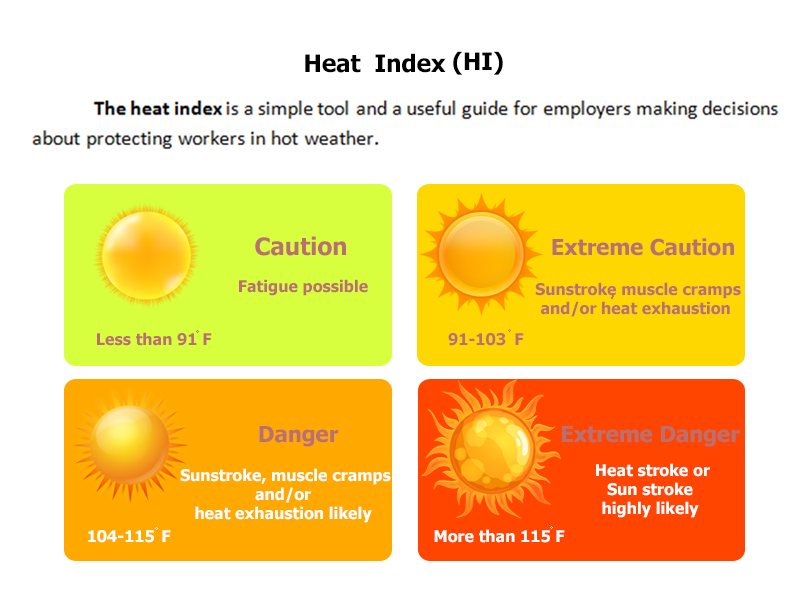
<style>
.page{position:relative;width:800px;height:600px;background:#ffffff}
.page>*{position:absolute;margin:0}
.t1{font:24px "Tahoma-Bold";color:#000000}
.t2{font:24px "Tahoma-Bold";color:#b97070}
.t3{font:22px "Tahoma-Bold";color:#b97070}
.t4{font:16px "Tahoma-Bold";color:#b97070}
.t5{font:16px "Tahoma-Bold";color:#fefefe}
.t6{font:16px "Tahoma-Bold";color:#ffffff}
</style>
<div class="page">
<p class="t1" style="left:305px;top:53px;width:141px;height:20px">Heat  Index</p>
<p class="t1" style="left:453px;top:51px;width:50px;height:24px">(HI)</p>
<p class="t2" style="left:255px;top:236px;width:91px;height:20px">Caution</p>
<p class="t3" style="left:552px;top:238px;width:182px;height:18px">Extreme Caution</p>
<p class="t4" style="left:239px;top:279px;width:129px;height:17px">Fatigue possible</p>
<p class="t4" style="left:535px;top:282px;width:206px;height:35px;text-align:center">Sunstroke muscle cramps<br> and/or heat exhaustion</p>
<p class="t4" style="left:611px;top:293px;width:4px;height:6px">,</p>
<p class="t4" style="left:508px;top:329px;width:3px;height:3px">ํ</p>
<p class="t4" style="left:97px;top:332px;width:115px;height:14px">Less than 91 F</p>
<p class="t4" style="left:196px;top:330px;width:3px;height:3px">ํ</p>
<p class="t4" style="left:448px;top:333px;width:58px;height:13px">91-103</p>
<p class="t4" style="left:515px;top:333px;width:9px;height:12px">F</p>
<p class="t3" style="left:259px;top:426px;width:80px;height:21px">Danger</p>
<p class="t3" style="left:562px;top:426px;width:178px;height:21px">Extreme Danger</p>
<p class="t5" style="left:180px;top:468px;width:211px;height:55px;text-align:center">Sunstroke, muscle cramps <br> and/or <br>heat exhaustion likely</p>
<p class="t5" style="left:596px;top:463px;width:114px;height:55px;text-align:center">Heat stroke or <br>Sun stroke<br>highly likely</p>
<p class="t6" style="left:88px;top:530px;width:66px;height:13px">104-115</p>
<p class="t6" style="left:155px;top:527px;width:3px;height:3px">ํ</p>
<p class="t6" style="left:162px;top:530px;width:9px;height:12px">F</p>
<p class="t6" style="left:434px;top:529px;width:131px;height:14px">More than 115 F</p>
<p class="t6" style="left:550px;top:526px;width:3px;height:3px">ํ</p>
</div>
